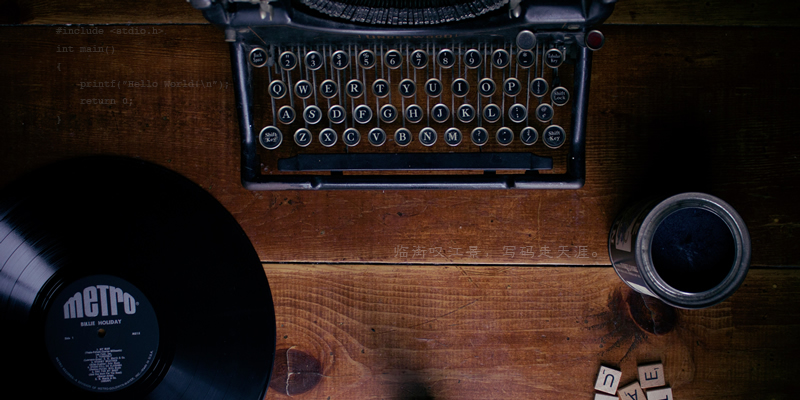
<style>
.page{position:relative;width:800px;height:400px}
.page>*{position:absolute;margin:0}
.t1{font:10px "Courier";color:#392d27}
.t2{font:18px "STLibian-SC-Regular";color:#88685d}
</style>
<div class="page">
<p class="t1" style="left:55px;top:27px;width:174px;height:97px">#include &lt;stdio.h&gt;<br>int main()<br>{<br>    printf(”Hello World!\n”);<br>    return 0;<br>}</p>
<p class="t2" style="left:394px;top:245px;width:203px;height:13px">临街叹江景，写码走天涯。</p>
</div>
